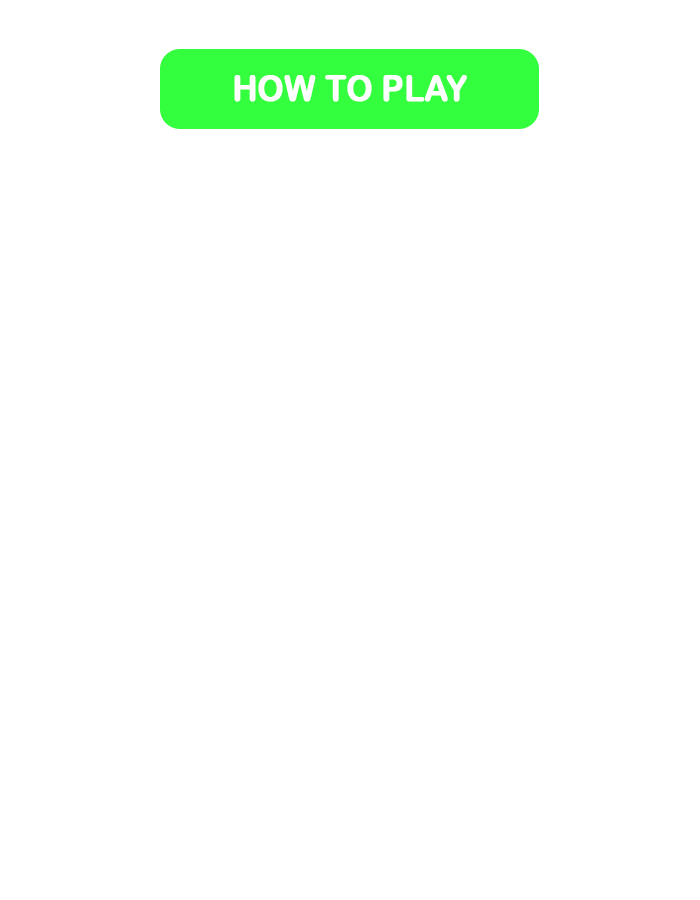
<style>
.page{position:relative;width:700px;height:900px;background:#ffffff}
.page>*{position:absolute;margin:0}
.t1{font:36.1px "ArialRoundedMTBold";color:#ffffff;font-weight:bold;scale:0.9 1}
</style>
<div class="page">
<p class="t1" style="left:234px;top:75px;width:233px;height:27px">HOW TO PLAY</p>
</div>
